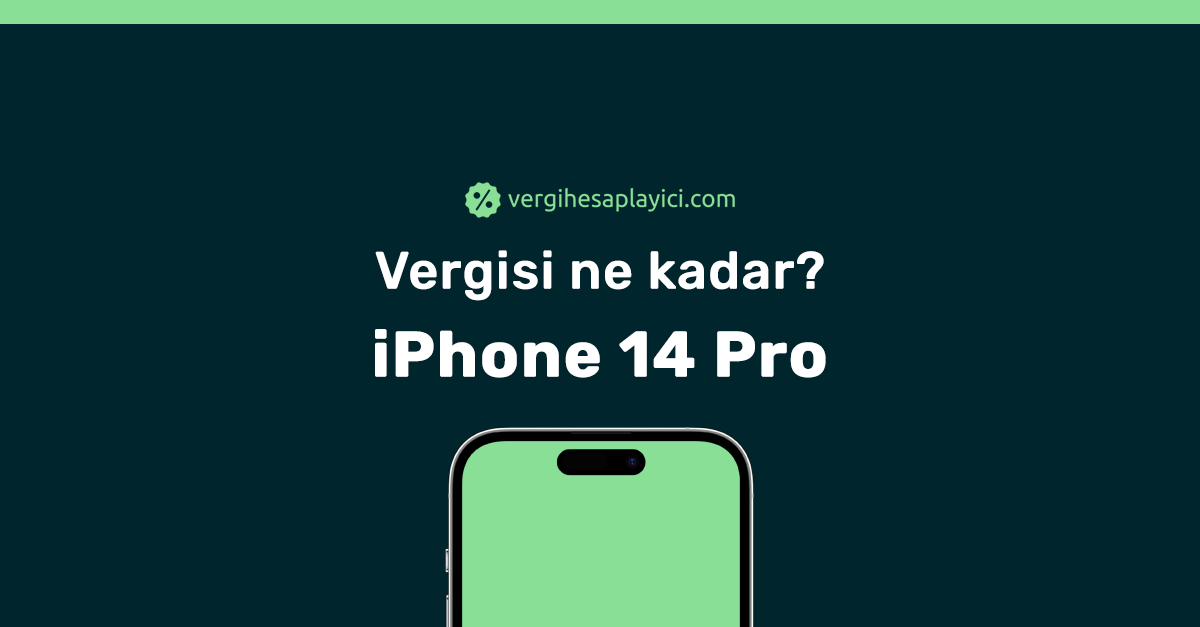
<style>
.page{position:relative;width:1200px;height:627px;background:#01252c}
.page>*{position:absolute;margin:0}
.t1{font:52px/88px "Rubik-Medium";color:#ffffff;font-weight:bold}
.t2{font:64px/88px "Rubik-Bold";color:#ffffff;font-weight:bold}
</style>
<div class="page">
<p class="t1" style="left:375px;top:250px;width:451px;height:128px;text-align:center">Vergisi ne kadar?<br><span class="t2">iPhone 14 Pro</span></p>
</div>
